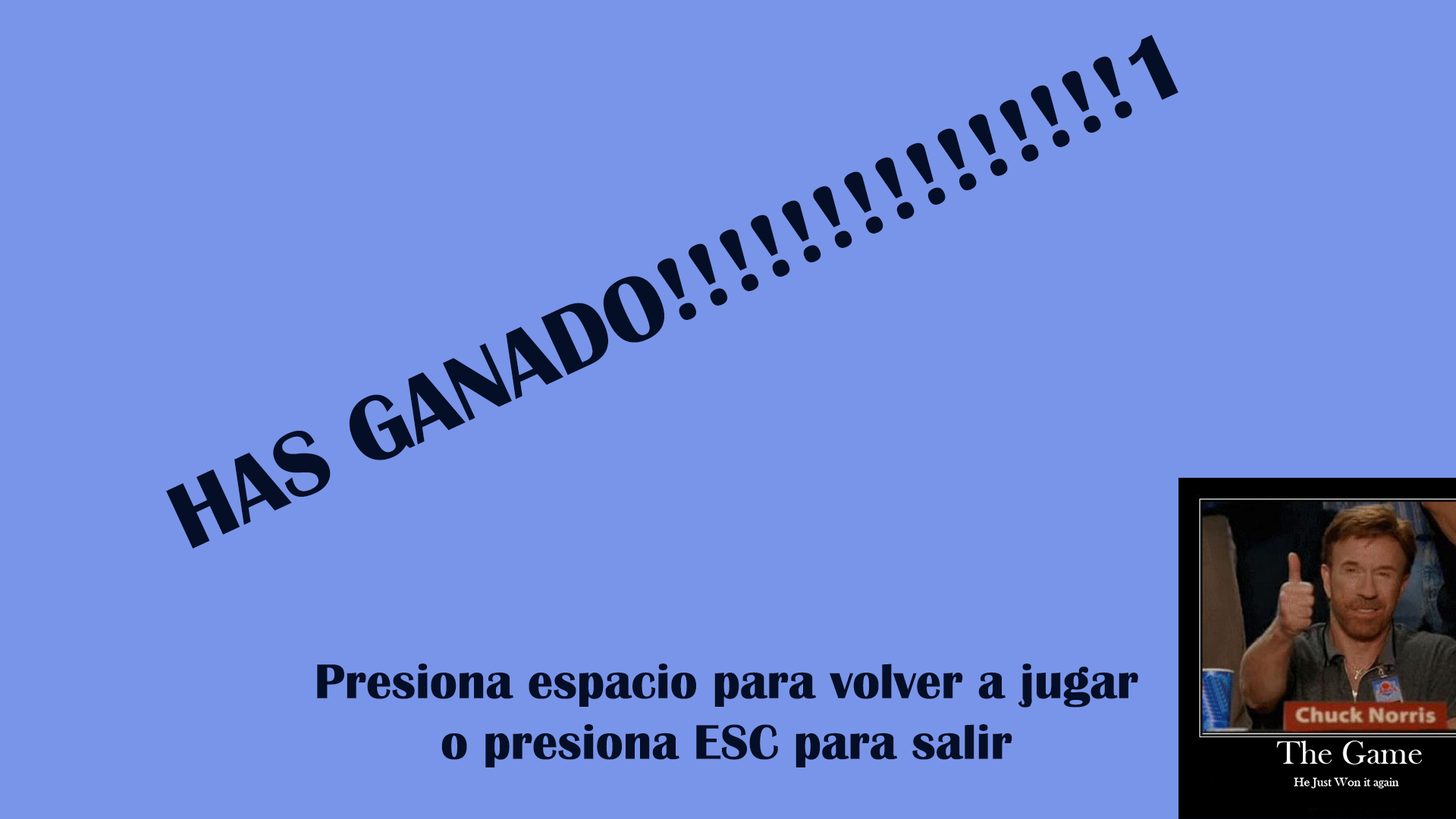
<style>
.page{position:relative;width:1456px;height:819px;background:#7995e9}
.page>*{position:absolute;margin:0}
.t1{font:94.8px "BritannicBold";color:#050e27}
.t2{font:50.6px "BritannicBold";color:#050e27}
</style>
<div class="page">
<p class="t1" style="left:166px;top:35px;width:1012px;height:514px;rotate:-25deg">HAS GANADO!!!!!!!!!!!!!!!1</p>
<p class="t2" style="left:317px;top:664px;width:821px;height:103px;text-align:center">Presiona espacio para volver a jugar<br>o presiona ESC para salir</p>
</div>
